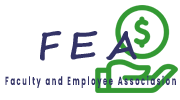
<style>
.page{position:relative;width:180px;height:100px;background:#ffffff}
.page>*{position:absolute;margin:0}
.t1{font:65.5px "SegoeScript-Bold";letter-spacing:0.25em;color:#333366}
.t2{font:20px "Poppins-Bold";letter-spacing:0.25em;color:#333366;scale:0.57 1}
</style>
<div class="page">
<p class="t1" style="left:40px;top:31px;width:97px;height:30px">FEA</p>
<p class="t2" style="left:5px;top:75px;width:171px;height:13px">Faculty and Employee Associasion</p>
</div>
